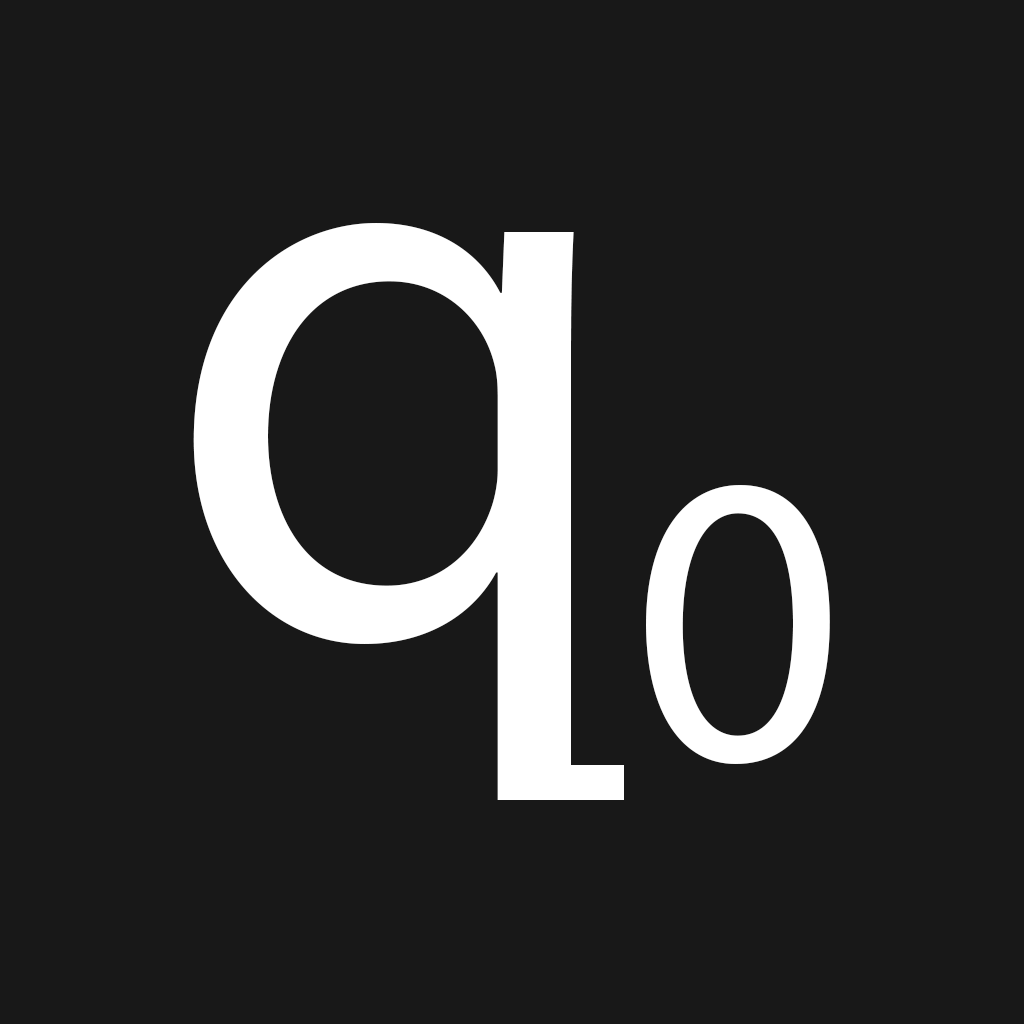
<style>
.page{position:relative;width:1024px;height:1024px;background:#181818}
.page>*{position:absolute;margin:0}
.t1{font:833.3px "MyriadPro-Regular";color:#ffffff}
.t2{font:416.7px "MyriadPro-Regular";color:#ffffff}
</style>
<div class="page">
<p class="t1" style="left:193px;top:223px;width:637px;height:577px">q<span class="t2">0</span></p>
</div>
